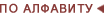
<style>
.page{position:relative;width:104px;height:17px;background:#ffffff}
.page>*{position:absolute;margin:0}
.t1{font:11.9px "ArialUnicodeMS";letter-spacing:0.06em;color:#883a37;font-weight:bold;scale:0.96 1}
</style>
<div class="page">
<p class="t1" style="left:0px;top:3px;width:93px;height:10px">ПО АЛФАВИТУ</p>
</div>
